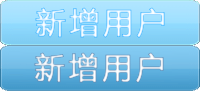
<style>
.page{position:relative;width:200px;height:91px}
.page>*{position:absolute;margin:0}
.t1{font:30px "MicrosoftYaHei";letter-spacing:0.1em;font-weight:bold}
</style>
<div class="page">
<p class="t1" style="left:35px;top:7px;width:130px;height:31px">新增用户</p>
<p class="t1" style="left:34px;top:52px;width:130px;height:31px">新增用户</p>
</div>
